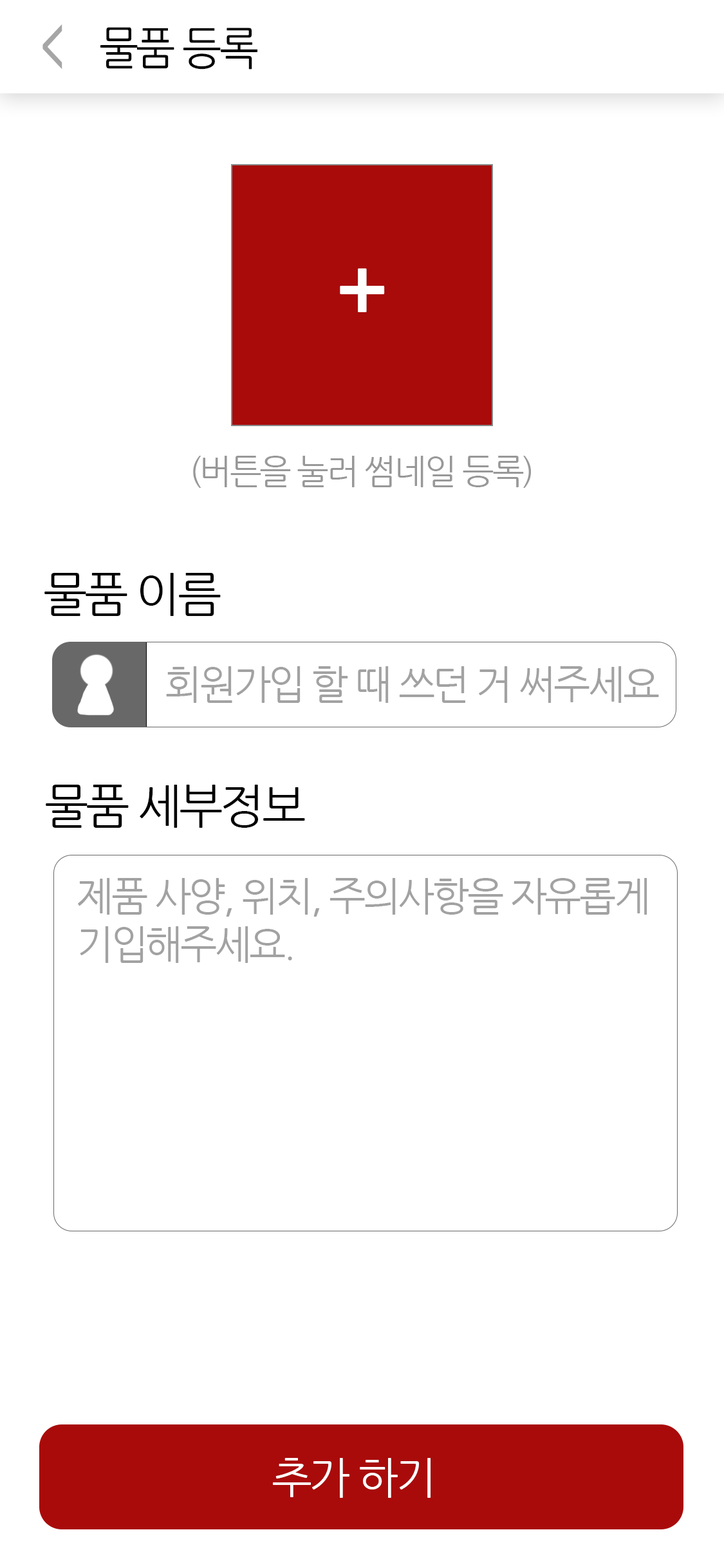
<style>
.page{position:relative;width:724px;height:1568px;background:#ffffff}
.page>*{position:absolute;margin:0}
.t1{font:45.2px "NanumGothicBold";letter-spacing:0.08em;color:#a6a6a6}
.t2{font:45.1px "NanumGothic";letter-spacing:-0.06em;color:#000000;scale:0.93 1}
.t3{font:79.8px "NanumGothicBold";letter-spacing:-0.06em;color:#ffffff}
.t4{font:34.1px "NanumGothic";letter-spacing:-0.06em;color:#989898}
.t5{font:47px "NanumGothic";letter-spacing:-0.06em;color:#000000}
.t6{font:39.3px "NanumGothic";letter-spacing:-0.06em;color:#a2a2a2}
.t7{font:39.3px/48.3px "NanumGothic";letter-spacing:-0.06em;color:#a2a2a2}
.t8{font:43.4px "NanumGothic";letter-spacing:-0.06em;color:#ffffff}
</style>
<div class="page">
<p class="t1" style="left:42px;top:24px;width:20px;height:45px;rotate:180deg">&gt;</p>
<p class="t2" style="left:100px;top:27px;width:157px;height:43px">물품 등록</p>
<p class="t3" style="left:340px;top:268px;width:45px;height:44px">+</p>
<p class="t4" style="left:193px;top:456px;width:338px;height:32px">(버튼을 눌러 썸네일 등록)</p>
<p class="t5" style="left:44px;top:573px;width:177px;height:43px">물품 이름</p>
<p class="t6" style="left:166px;top:666px;width:493px;height:37px">회원가입 할 때 쓰던 거 써주세요</p>
<p class="t5" style="left:46px;top:785px;width:259px;height:43px">물품 세부정보</p>
<p class="t7" style="left:78px;top:878px;width:570px;height:85px">제품 사양, 위치, 주의사항을 자유롭게 <br>기입해주세요.</p>
<p class="t8" style="left:273px;top:1458px;width:158px;height:40px">추가 하기</p>
</div>
